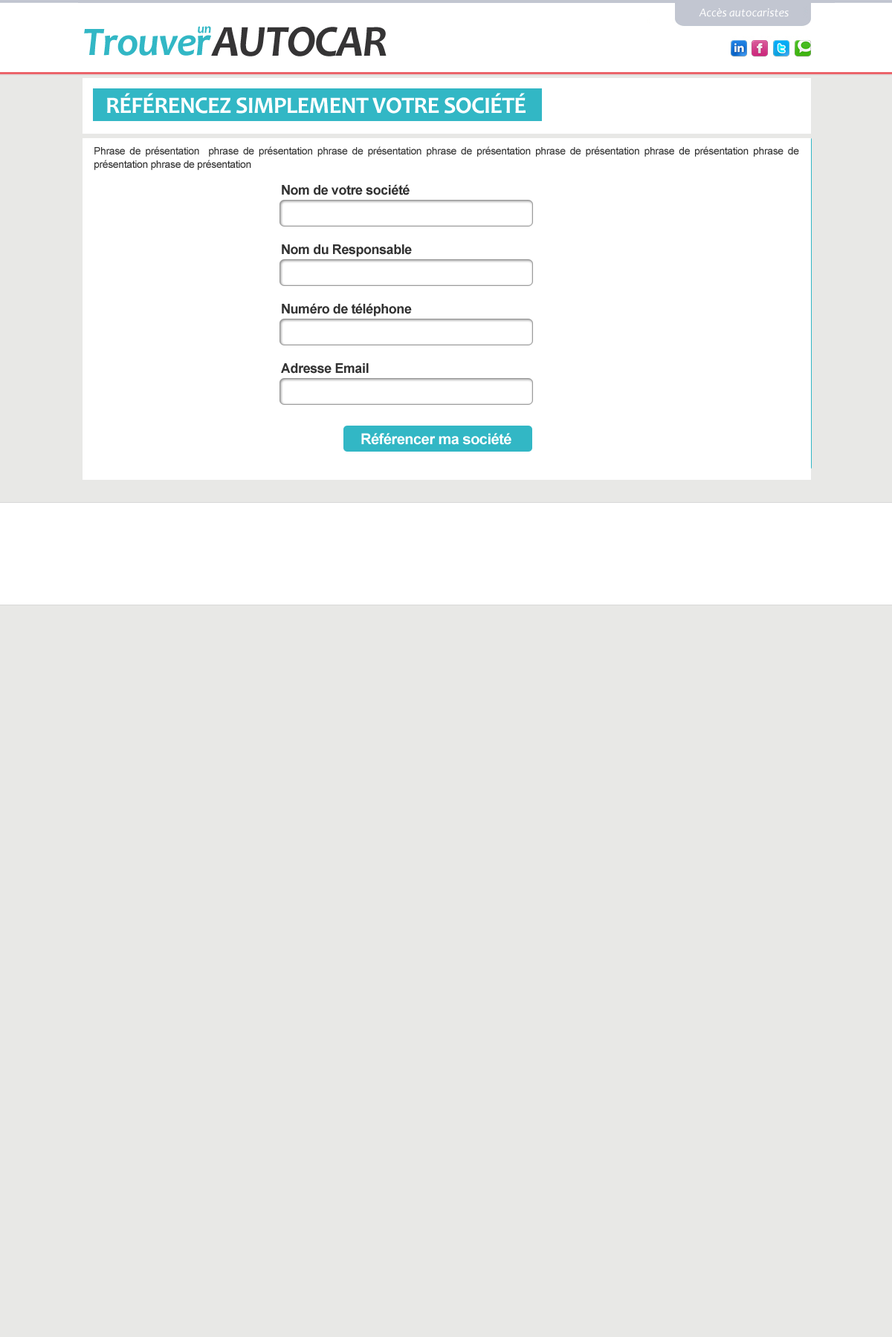
<style>
.page{position:relative;width:892px;height:1337px;background:#e8e8e6}
.page>*{position:absolute;margin:0}
.t1{font:11.9px "Candara-Italic";color:#ffffff}
.t2{font:40.9px "Candara-BoldItalic";letter-spacing:-0.025em;color:#32b7c5}
.t3{font:13.4px "Candara-BoldItalic";letter-spacing:-0.025em;color:#32b7c5}
.t4{font:44.6px "Candara-BoldItalic";letter-spacing:-0.025em;color:#353435}
.t5{font:23.8px "Candara-Bold";letter-spacing:-0.025em;color:#ffffff;text-transform:uppercase}
.t6{font:10.4px/13.4px "ArialMT";letter-spacing:-0.025em;color:#333333}
.t7{font:13.4px/13.4px "Arial-BoldMT";letter-spacing:-0.025em;color:#333333}
.t8{font:14.9px "Arial-BoldMT";letter-spacing:-0.025em;color:#ffffff}
</style>
<div class="page">
<p class="t1" style="left:698px;top:8px;width:90px;height:9px">Accès autocaristes</p>
<p class="t2" style="left:84px;top:29px;width:127px;height:27px">Trouver</p>
<p class="t3" style="left:198px;top:26px;width:13px;height:7px">un</p>
<p class="t4" style="left:211px;top:27px;width:175px;height:29px">AUTOCAR</p>
<p class="t5" style="left:107px;top:93px;width:418px;height:21px">RéféRENCEZ SIMPLEMENT VOTRE SOCIété</p>
<p class="t6" style="left:94px;top:146px;width:705px;height:24px;text-align:justify">Phrase de présentation  phrase de présentation phrase de présentation phrase de présentation phrase de présentation phrase de présentation phrase de présentation phrase de présentation</p>
<p class="t7" style="left:281px;top:184px;width:131px;height:190px;text-align:justify">Nom de votre société<br><br><br><br><br>Nom du Responsable<br><br><br><br><br>Numéro de téléphone<br><br><br><br><br>Adresse Email</p>
<p class="t8" style="left:361px;top:433px;width:150px;height:12px">Référencer ma société</p>
</div>
